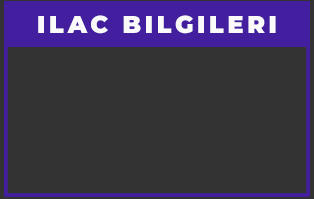
<style>
.page{position:relative;width:314px;height:199px;background:#333333}
.page>*{position:absolute;margin:0}
.t1{font:24px "Montserrat-Black";letter-spacing:0.15em;color:#fafafa;text-transform:uppercase}
</style>
<div class="page">
<p class="t1" style="left:38px;top:15px;width:238px;height:19px">ILAC BILGILERI</p>
</div>
